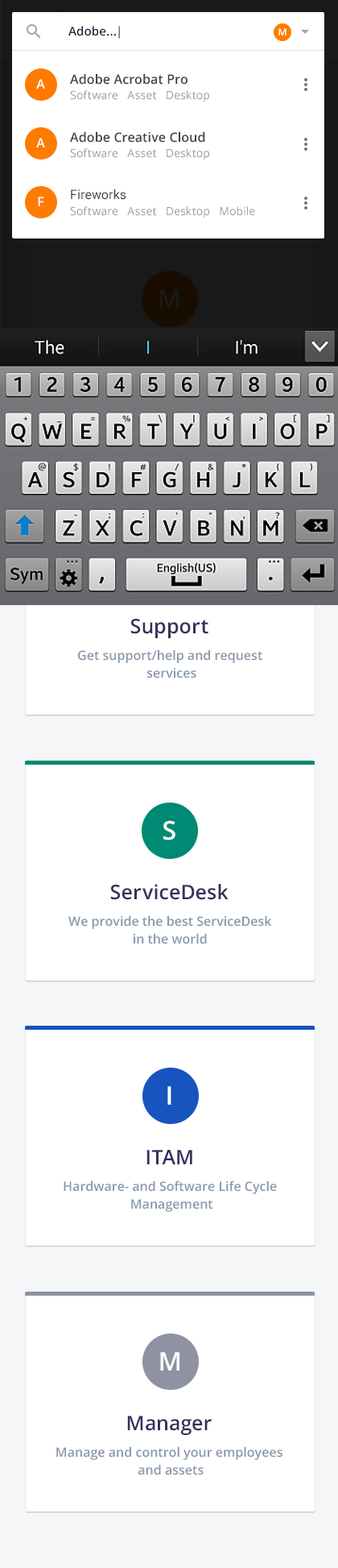
<style>
.page{position:relative;width:338px;height:1568px;background:#ffffff}
.page>*{position:absolute;margin:0}
.t1{font:12.1px "OpenSans-Semibold";letter-spacing:0.01em;color:#23233d}
.t2{font:9.7px "OpenSans-Semibold";letter-spacing:0.01em;color:#ffffff}
.t3{font:12.9px "OpenSans-Semibold";letter-spacing:0.01em;color:#404040}
.t4{font:12.9px "OpenSans-Semibold";letter-spacing:0.01em;color:#ffffff}
.t5{font:11.3px "OpenSans";letter-spacing:0.01em;color:#9a9a9a}
.t6{font:12.9px "Roboto-Regular";letter-spacing:0.01em;color:#404040}
.t7{font:25.7px "OpenSans-Semibold";letter-spacing:0.005em;color:#191919}
.t8{font:20.1px "OpenSans-Semibold";letter-spacing:0.005em;color:#32325d}
.t9{font:12.9px/17.7px "OpenSans-Semibold";color:#8898aa}
.t10{font:25.7px "OpenSans-Semibold";letter-spacing:0.005em;color:#ffffff}
</style>
<div class="page">
<p class="t1" style="left:68px;top:26px;width:52px;height:13px">Adobe...|</p>
<p class="t2" style="left:279px;top:28px;width:8px;height:7px">M</p>
<p class="t3" style="left:70px;top:73px;width:118px;height:12px">Adobe Acrobat Pro</p>
<p class="t4" style="left:36px;top:79px;width:9px;height:10px">A</p>
<p class="t5" style="left:70px;top:90px;width:139px;height:12px">Software   Asset   Desktop</p>
<p class="t4" style="left:36px;top:138px;width:9px;height:9px">A</p>
<p class="t3" style="left:70px;top:131px;width:135px;height:12px">Adobe Creative Cloud</p>
<p class="t5" style="left:70px;top:148px;width:139px;height:12px">Software   Asset   Desktop</p>
<p class="t4" style="left:38px;top:197px;width:6px;height:9px">F</p>
<p class="t6" style="left:71px;top:189px;width:56px;height:11px">Fireworks</p>
<p class="t5" style="left:70px;top:206px;width:185px;height:12px">Software   Asset   Desktop   Mobile</p>
<p class="t7" style="left:160px;top:289px;width:19px;height:19px">M</p>
<p class="t8" style="left:131px;top:619px;width:78px;height:19px">Support</p>
<p class="t9" style="left:78px;top:649px;width:185px;height:29px;text-align:center">Get support/help and request <br>services</p>
<p class="t10" style="left:164px;top:820px;width:12px;height:20px">S</p>
<p class="t8" style="left:110px;top:884px;width:119px;height:16px">ServiceDesk</p>
<p class="t9" style="left:68px;top:915px;width:204px;height:29px;text-align:center">We provide the best ServiceDesk<br>in the world</p>
<p class="t10" style="left:168px;top:1086px;width:4px;height:19px">I</p>
<p class="t8" style="left:147px;top:1150px;width:46px;height:14px">ITAM</p>
<p class="t9" style="left:64px;top:1180px;width:213px;height:32px;text-align:center">Hardware- and Software Life Cycle <br>Management</p>
<p class="t10" style="left:160px;top:1352px;width:20px;height:19px">M</p>
<p class="t8" style="left:127px;top:1416px;width:85px;height:19px">Manager</p>
<p class="t9" style="left:56px;top:1446px;width:227px;height:29px;text-align:center">Manage and control your employees <br>and assets</p>
</div>
